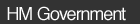
<style>
.page{position:relative;width:140px;height:24px;background:#333333}
.page>*{position:absolute;margin:0}
.t1{font:18px "Helvetica";letter-spacing:-0.06em;color:#ffffff}
</style>
<div class="page">
<p class="t1" style="left:7px;top:6px;width:119px;height:15px">HM Government</p>
</div>
